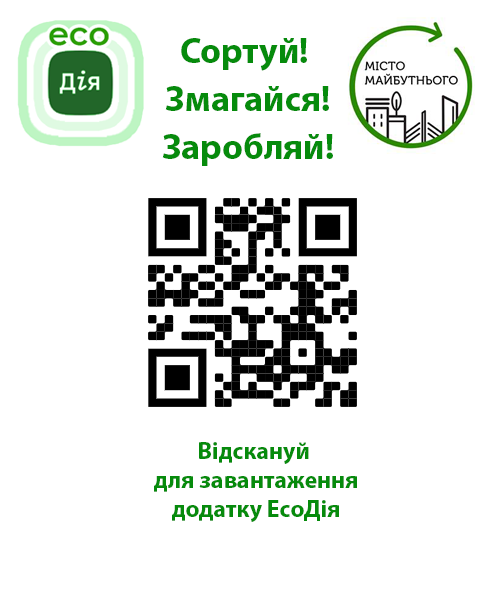
<style>
.page{position:relative;width:500px;height:600px;background:#ffffff}
.page>*{position:absolute;margin:0}
.t1{font:36px/48px "MyriadPro-Bold";color:#068b0c}
.t2{font:24px "MyriadPro-Bold";color:#068b0c}
</style>
<div class="page">
<p class="t1" style="left:162px;top:38px;width:171px;height:128px;text-align:center">Сортуй! <br>Змагайся!<br>Заробляй!</p>
<p class="t2" style="left:154px;top:442px;width:203px;height:80px;text-align:center">Відскануй <br>для завантаження<br>додатку EcoДія</p>
</div>
